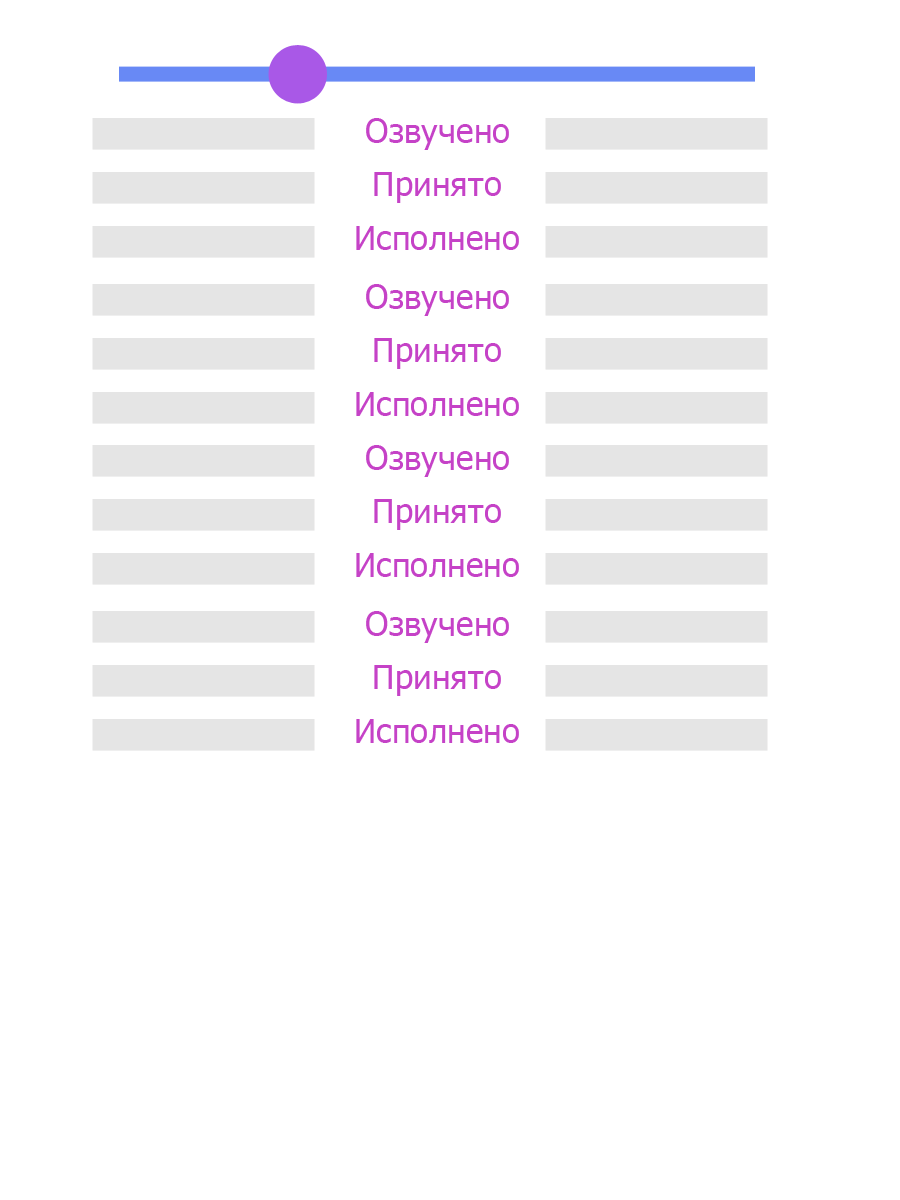
<style>
.page{position:relative;width:900px;height:1200px;background:#ffffff}
.page>*{position:absolute;margin:0}
.t1{font:33.3px "Tahoma";color:#c542c7}
</style>
<div class="page">
<p class="t1" style="left:366px;top:118px;width:143px;height:32px">Озвучено</p>
<p class="t1" style="left:374px;top:172px;width:127px;height:31px">Принято</p>
<p class="t1" style="left:356px;top:226px;width:163px;height:24px">Исполнено</p>
<p class="t1" style="left:366px;top:284px;width:143px;height:32px">Озвучено</p>
<p class="t1" style="left:374px;top:338px;width:127px;height:31px">Принято</p>
<p class="t1" style="left:356px;top:392px;width:163px;height:24px">Исполнено</p>
<p class="t1" style="left:366px;top:445px;width:143px;height:32px">Озвучено</p>
<p class="t1" style="left:374px;top:499px;width:127px;height:31px">Принято</p>
<p class="t1" style="left:356px;top:553px;width:163px;height:24px">Исполнено</p>
<p class="t1" style="left:366px;top:611px;width:143px;height:32px">Озвучено</p>
<p class="t1" style="left:374px;top:665px;width:127px;height:31px">Принято</p>
<p class="t1" style="left:356px;top:719px;width:163px;height:24px">Исполнено</p>
</div>
